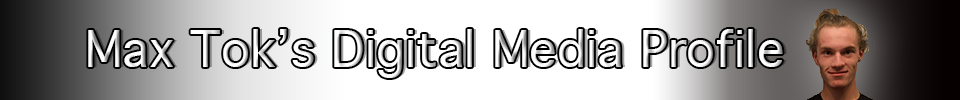
<style>
.page{position:relative;width:960px;height:100px;background:#ffffff}
.page>*{position:absolute;margin:0}
.t1{font:48px "Geneva";color:#ffffff}
</style>
<div class="page">
<p class="t1" style="left:88px;top:29px;width:695px;height:49px">Max Tok’s Digital Media Profile</p>
</div>
